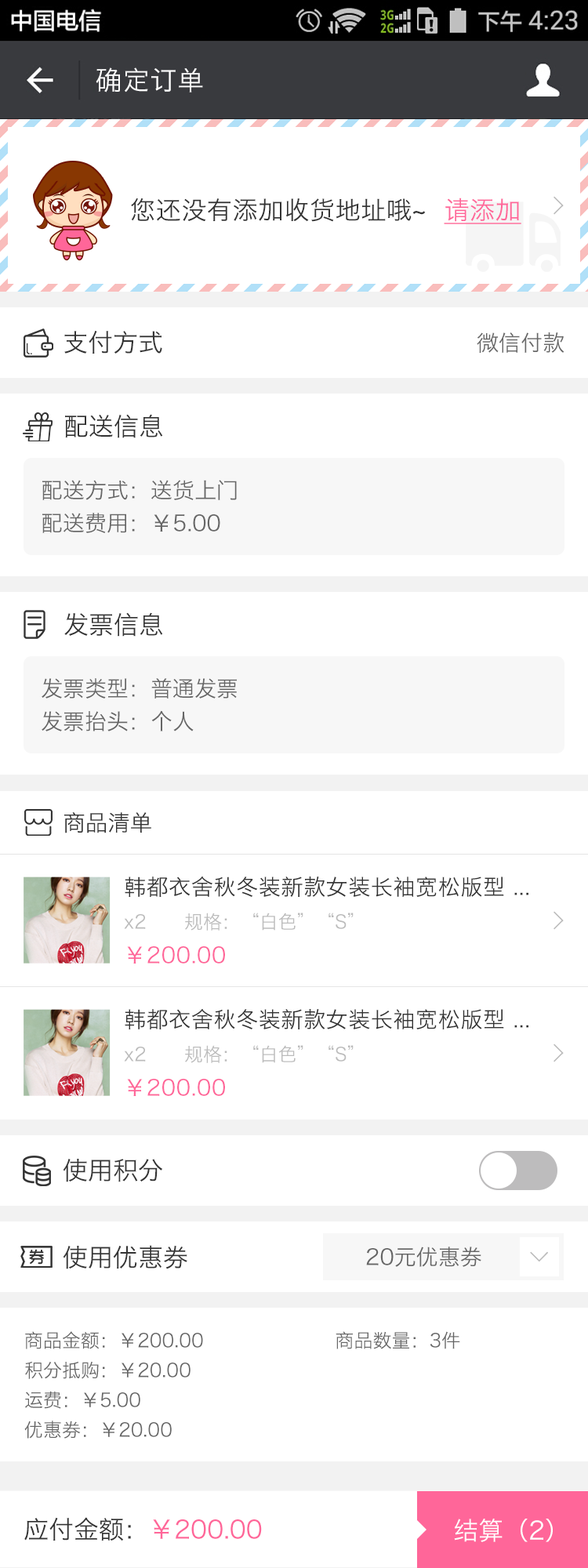
<style>
.page{position:relative;width:588px;height:1568px;background:#ffffff}
.page>*{position:absolute;margin:0}
.t1{font:26.7px "HiraginoSansGB-W3";letter-spacing:0.022em;color:#ffffff}
.t2{font:25.1px "HiraginoSansGB-W3";letter-spacing:0.022em;color:#333333}
.t3{font:25.1px "HiraginoSansGB-W3";letter-spacing:0.022em;color:#ff6699;text-decoration:underline}
.t4{font:25.1px "SimSun";color:#bbbbbb;font-weight:bold}
.t5{font:25.1px "HiraginoSansGB-W3";color:#333333}
.t6{font:22px "HiraginoSansGB-W3";color:#666666}
.t7{font:22px/31.4px "HiraginoSansGB-W3";color:#666666}
.t8{font:22.4px "HiraginoSansGB-W3";color:#333333}
.t9{font:22px "HiraginoSansGB-W3";letter-spacing:0.022em;color:#333333}
.t10{font:18.8px "HiraginoSansGB-W3";color:#bbbbbb}
.t11{font:22px "HiraginoSansGB-W3";letter-spacing:0.022em;color:#ff6699}
.t12{font:18.8px/28.2px "HiraginoSansGB-W3";color:#666666}
.t13{font:25.1px "HiraginoSansGB-W3";color:#ff6699}
.t14{font:25.1px "HiraginoSansGB-W3";color:#ffffff}
</style>
<div class="page">
<p class="t1" style="left:96px;top:67px;width:107px;height:26px">确定订单</p>
<p class="t2" style="left:131px;top:198px;width:390px;height:26px">您还没有添加收货地址哦~  <span class="t3">请添加</span></p>
<p class="t4" style="left:554px;top:196px;width:10px;height:19px">&gt;</p>
<p class="t5" style="left:64px;top:331px;width:98px;height:23px">支付方式</p>
<p class="t6" style="left:477px;top:332px;width:87px;height:21px">微信付款</p>
<p class="t5" style="left:65px;top:414px;width:98px;height:24px">配送信息</p>
<p class="t7" style="left:42px;top:480px;width:195px;height:53px">配送方式：送货上门<br>配送费用：￥5.00</p>
<p class="t5" style="left:64px;top:612px;width:99px;height:25px">发票信息</p>
<p class="t7" style="left:42px;top:678px;width:195px;height:53px">发票类型：普通发票<br>发票抬头：个人</p>
<p class="t8" style="left:64px;top:812px;width:87px;height:21px">商品清单</p>
<p class="t9" style="left:125px;top:876px;width:403px;height:21px">韩都衣舍秋冬装新款女装长袖宽松版型 ...</p>
<p class="t10" style="left:124px;top:913px;width:230px;height:18px">x2      规格：“白色”“S”</p>
<p class="t4" style="left:554px;top:911px;width:10px;height:19px">&gt;</p>
<p class="t11" style="left:127px;top:946px;width:98px;height:18px">￥200.00</p>
<p class="t9" style="left:125px;top:1008px;width:403px;height:21px">韩都衣舍秋冬装新款女装长袖宽松版型 ...</p>
<p class="t10" style="left:124px;top:1045px;width:230px;height:18px">x2      规格：“白色”“S”</p>
<p class="t4" style="left:554px;top:1044px;width:10px;height:18px">&gt;</p>
<p class="t11" style="left:127px;top:1079px;width:98px;height:17px">￥200.00</p>
<p class="t5" style="left:63px;top:1159px;width:100px;height:23px">使用积分</p>
<p class="t5" style="left:63px;top:1245px;width:124px;height:24px">使用优惠券</p>
<p class="t6" style="left:366px;top:1247px;width:115px;height:20px">20元优惠券</p>
<p class="t4" style="left:530px;top:1251px;width:18px;height:11px;rotate:90deg">&gt;</p>
<p class="t12" style="left:24px;top:1331px;width:436px;height:108px">商品金额：￥200.00                     商品数量：3件<br>积分抵购：￥20.00<br>运费：￥5.00<br>优惠券：￥20.00</p>
<p class="t13" style="left:24px;top:1517px;width:238px;height:24px"><span class="t5">应付金额：</span>￥200.00</p>
<p class="t14" style="left:454px;top:1518px;width:99px;height:24px">结算（2）</p>
</div>
